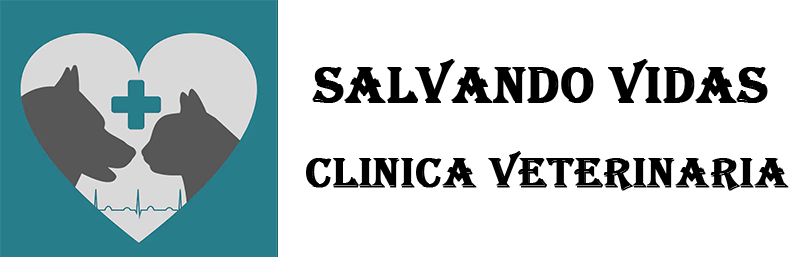
<style>
.page{position:relative;width:800px;height:257px;background:#ffffff}
.page>*{position:absolute;margin:0}
.t1{font:53.3px "Algerian";color:#000000;font-weight:bold}
.t2{font:44.4px "Algerian";color:#000000;font-weight:bold}
</style>
<div class="page">
<p class="t1" style="left:312px;top:59px;width:456px;height:44px">Salvando Vidas</p>
<p class="t2" style="left:306px;top:151px;width:483px;height:40px">CLINICA VETERINARIA</p>
</div>
